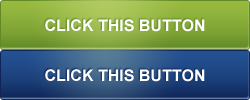
<style>
.page{position:relative;width:250px;height:100px}
.page>*{position:absolute;margin:0}
.t1{font:16px "Arial-BoldMT";color:#ffffff}
</style>
<div class="page">
<p class="t1" style="left:45px;top:19px;width:160px;height:13px">CLICK THIS BUTTON</p>
<p class="t1" style="left:45px;top:69px;width:160px;height:13px">CLICK THIS BUTTON</p>
</div>
